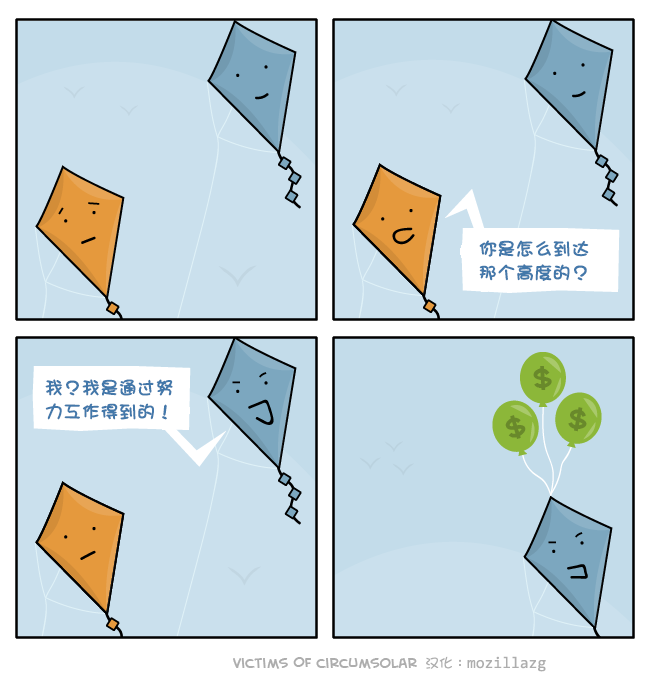
<style>
.page{position:relative;width:650px;height:680px;background:#cae0ed}
.page>*{position:absolute;margin:0}
.t1{font:18px/24px "DFGirl";color:#4378aa;font-weight:bold}
</style>
<div class="page">
<p class="t1" style="left:479px;top:240px;width:110px;height:41px">你是怎么到达<br>那个高度的？</p>
<p class="t1" style="left:45px;top:379px;width:128px;height:41px">我？我是通过努<br>力工作得到的！</p>
</div>
